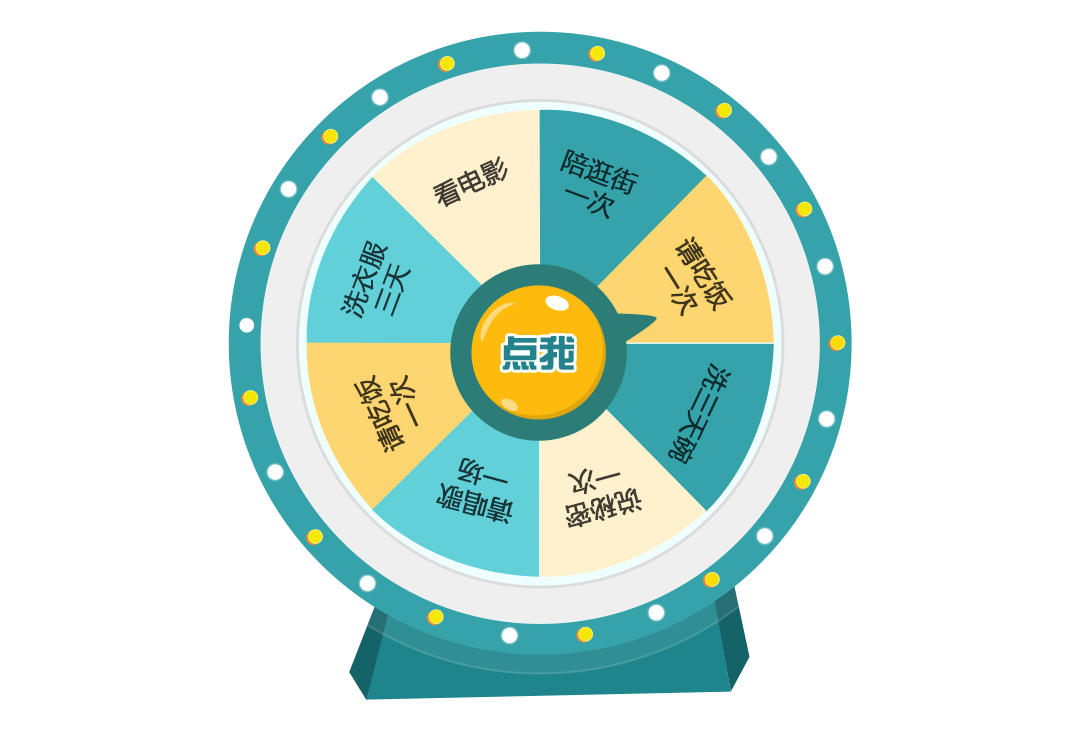
<style>
.page{position:relative;width:1085px;height:753px;background:#ffffff}
.page>*{position:absolute;margin:0}
.t1{font:25.4px/29.7px "MicrosoftYaHei";color:#0e292b;font-weight:bold}
.t2{font:25.4px "MicrosoftYaHei";color:#403c34;font-weight:bold}
.t3{font:25.4px/29.7px "MicrosoftYaHei";color:#183436;font-weight:bold}
.t4{font:25.4px/29.7px "MicrosoftYaHei";color:#3f361c;font-weight:bold}
.t5{font:37.5px "FZZYJW--GB1-0";letter-spacing:-0.02em;color:#22838c;font-weight:bold}
.t6{font:25.4px "MicrosoftYaHei";color:#0e292b;font-weight:bold}
.t7{font:25.4px/29.7px "MicrosoftYaHei";color:#403c34;font-weight:bold}
</style>
<div class="page">
<p class="t1" style="left:560px;top:149px;width:79px;height:70px;text-align:center;rotate:20deg">陪逛街<br>一次</p>
<p class="t2" style="left:432px;top:156px;width:76px;height:52px;rotate:-25deg">看电影</p>
<p class="t3" style="left:340px;top:240px;width:71px;height:79px;text-align:center;rotate:-69deg">洗衣服<br>三天</p>
<p class="t4" style="left:664px;top:236px;width:70px;height:81px;text-align:center;rotate:58deg">请吃饭<br>一次</p>
<p class="t5" style="left:502px;top:336px;width:72px;height:34px">点我</p>
<p class="t6" style="left:668px;top:362px;width:64px;height:103px;rotate:115deg">洗三天碗</p>
<p class="t4" style="left:353px;top:374px;width:66px;height:79px;text-align:center;rotate:-115deg">请吃饭<br>一次</p>
<p class="t3" style="left:436px;top:458px;width:77px;height:66px;text-align:center;rotate:-165deg">请唱歌<br>一场</p>
<p class="t7" style="left:565px;top:468px;width:77px;height:60px;text-align:center;rotate:165deg">说秘密<br>一次</p>
</div>
